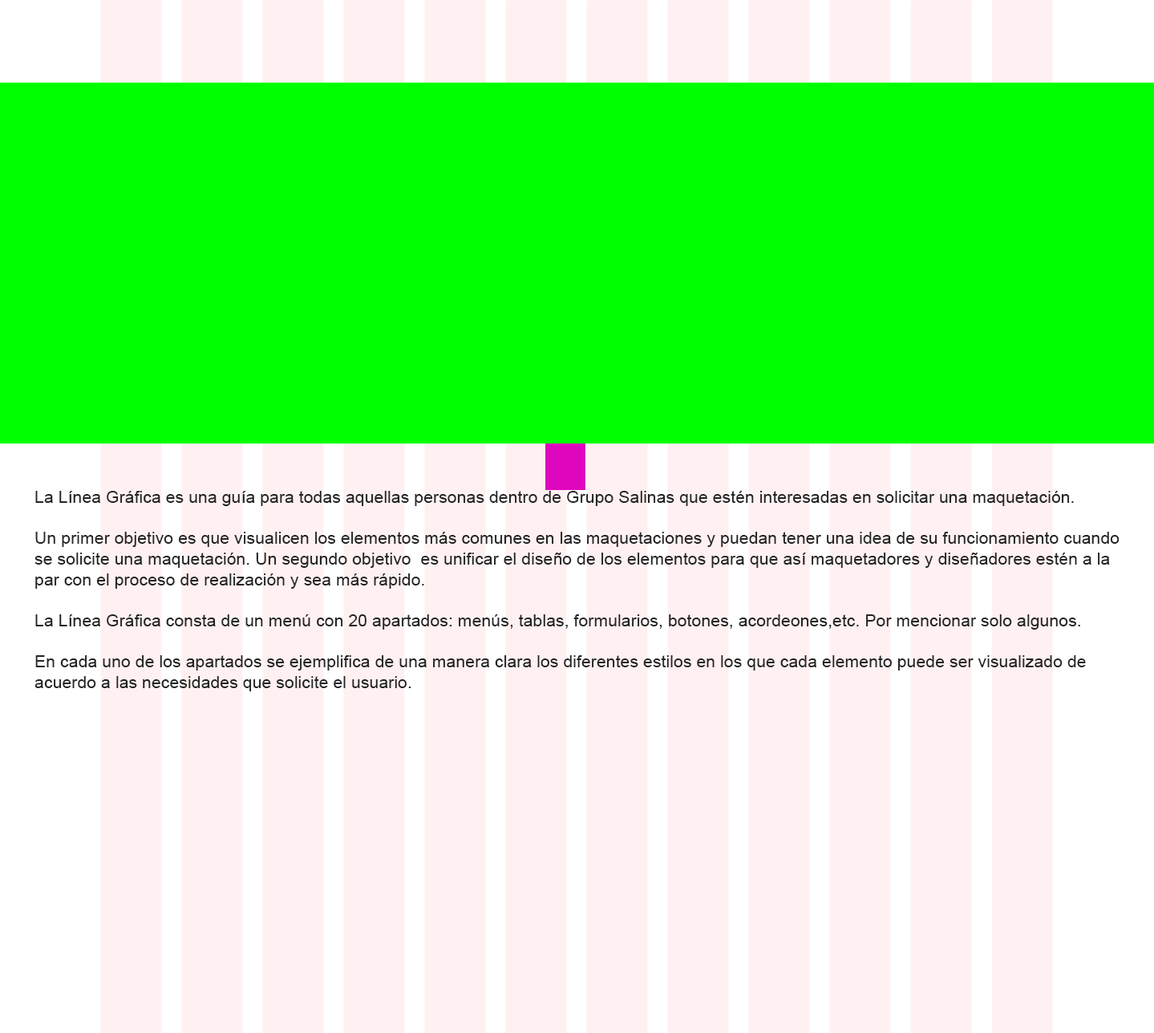
<style>
.page{position:relative;width:1154px;height:1033px;background:#00ff00}
.page>*{position:absolute;margin:0}
.t1{font:17.1px "ArialMT";color:#242424}
</style>
<div class="page">
<p class="t1" style="left:34px;top:491px;width:1086px;height:200px">La Línea Gráfica es una guía para todas aquellas personas dentro de Grupo Salinas que estén interesadas en solicitar una maquetación.<br><br>Un primer objetivo es que visualicen los elementos más comunes en las maquetaciones y puedan tener una idea de su funcionamiento cuando se solicite una maquetación. Un segundo objetivo  es unificar el diseño de los elementos para que así maquetadores y diseñadores estén a la par con el proceso de realización y sea más rápido. <br><br>La Línea Gráfica consta de un menú con 20 apartados: menús, tablas, formularios, botones, acordeones,etc. Por mencionar solo algunos. <br><br>En cada uno de los apartados se ejemplifica de una manera clara los diferentes estilos en los que cada elemento puede ser visualizado de acuerdo a las necesidades que solicite el usuario.</p>
</div>
